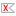
<style>
.page{position:relative;width:16px;height:16px;background:#ffffff}
.page>*{position:absolute;margin:0}
.t1{font:9px "CascadiaMono-Roman"}
</style>
<div class="page">
<p class="t1" style="left:3px;top:4px;width:5px;height:8px">X</p>
</div>
